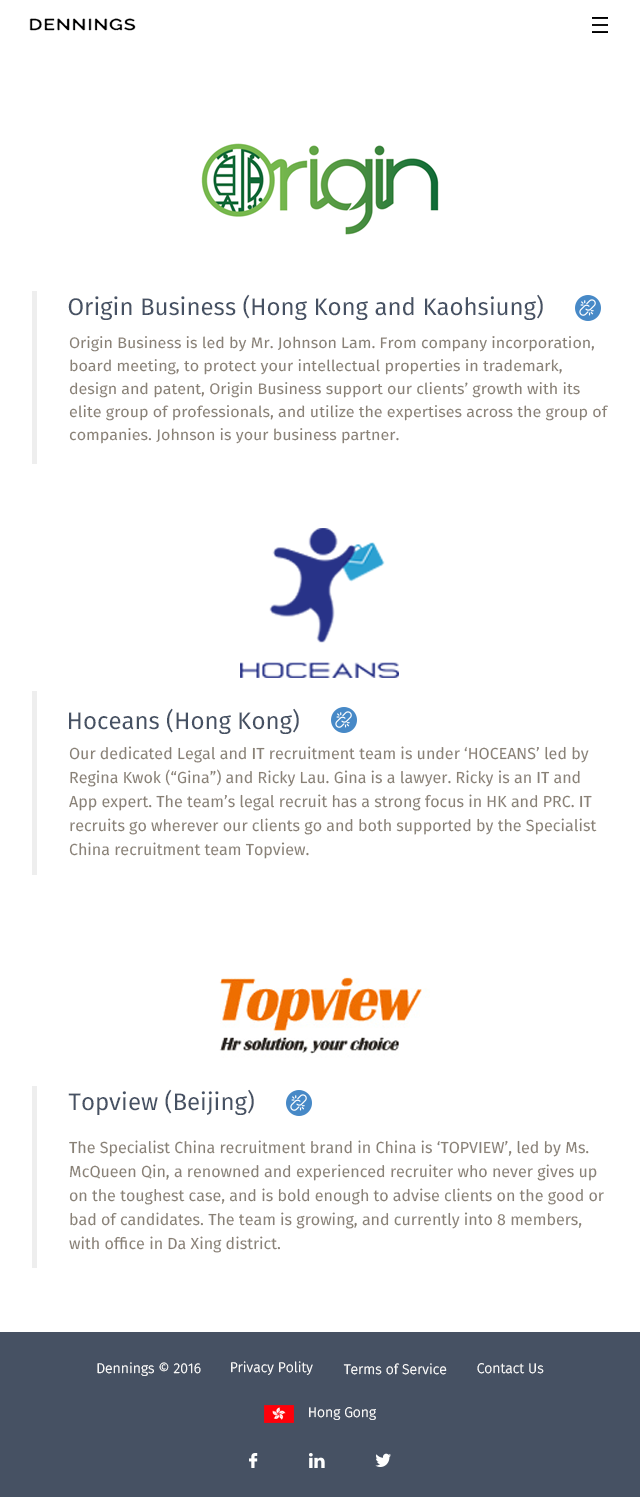
<style>
.page{position:relative;width:640px;height:1497px;background:#ffffff}
.page>*{position:absolute;margin:0}
.t1{font:24px "FiraSans-Regular";color:#465163}
.t2{font:15.2px/22.8px "FiraSans-Regular";color:#898176;scale:1.05 1}
.t3{font:16px/24px "FiraSans-Regular";color:#898176}
.t4{font:14px "FiraSans-Light";color:#ffffff}
</style>
<div class="page">
<p class="t1" style="left:68px;top:294px;width:475px;height:26px">Origin Business (Hong Kong and Kaohsiung)</p>
<p class="t2" style="left:69px;top:336px;width:539px;height:108px">Origin Business is led by Mr. Johnson Lam. From company incorporation, board meeting, to protect your intellectual properties in trademark, design and patent, Origin Business support our clients’ growth with its elite group of professionals, and utilize the expertises across the group of companies. Johnson is your business partner.</p>
<p class="t1" style="left:69px;top:708px;width:230px;height:26px">Hoceans (Hong Kong)</p>
<p class="t3" style="left:69px;top:746px;width:528px;height:113px">Our dedicated Legal and IT recruitment team is under ‘HOCEANS’ led by Regina Kwok (“Gina”) and Ricky Lau. Gina is a lawyer. Ricky is an IT and App expert. The team’s legal recruit has a strong focus in HK and PRC. IT recruits go wherever our clients go and both supported by the Specialist China recruitment team Topview.</p>
<p class="t1" style="left:68px;top:1089px;width:186px;height:26px">Topview (Beijing)</p>
<p class="t3" style="left:69px;top:1140px;width:535px;height:113px">The Specialist China recruitment brand in China is ‘TOPVIEW’, led by Ms. McQueen Qin, a renowned and experienced recruiter who never gives up on the toughest case, and is bold enough to advise clients on the good or bad of candidates. The team is growing, and currently into 8 members, with office in Da Xing district.</p>
<p class="t4" style="left:231px;top:1361px;width:82px;height:14px">Privacy Polity</p>
<p class="t4" style="left:97px;top:1362px;width:104px;height:14px">Dennings © 2016</p>
<p class="t4" style="left:343px;top:1363px;width:104px;height:12px">Terms of Service</p>
<p class="t4" style="left:477px;top:1363px;width:67px;height:11px">Contact Us</p>
<p class="t4" style="left:309px;top:1407px;width:67px;height:13px">Hong Gong</p>
</div>
